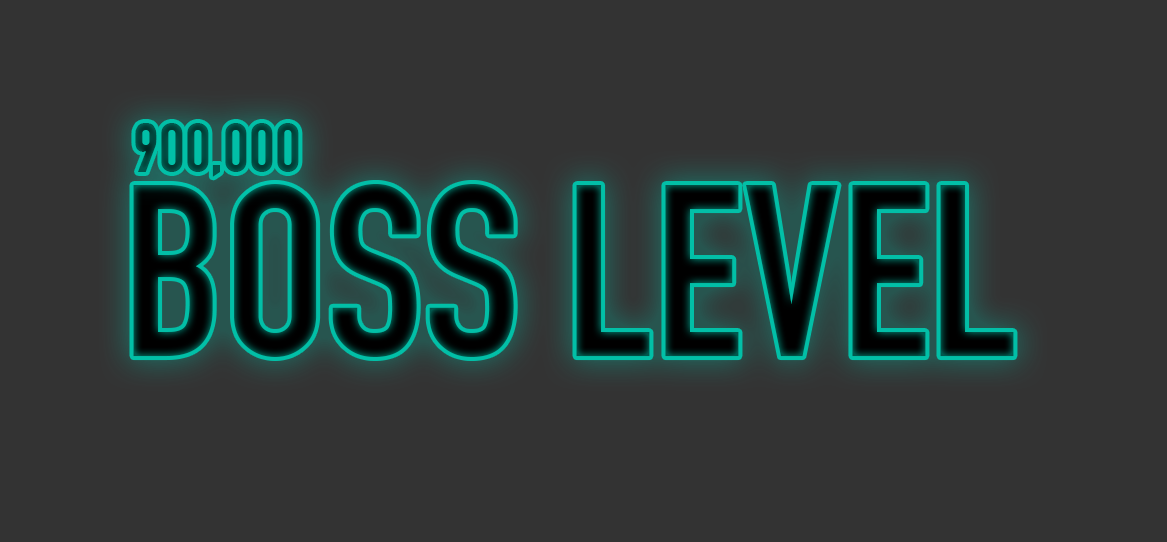
<style>
.page{position:relative;width:1167px;height:542px;background:#333333}
.page>*{position:absolute;margin:0}
.t1{font:69.1px "DINEngschrift";color:#014940}
.t2{font:240px "DINEngschrift"}
</style>
<div class="page">
<p class="t1" style="left:135px;top:123px;width:164px;height:54px">900,000</p>
<p class="t2" style="left:133px;top:184px;width:881px;height:173px">BOSS LEVEL</p>
</div>
